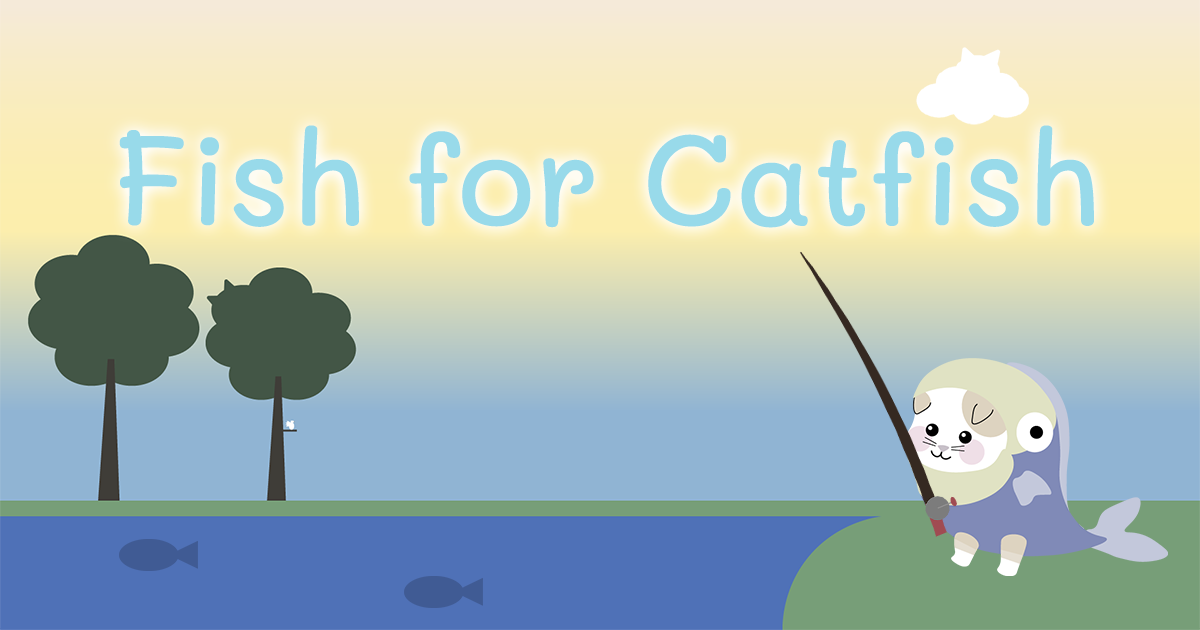
<style>
.page{position:relative;width:1200px;height:630px}
.page>*{position:absolute;margin:0}
.t1{font:128px "Mali-Medium";color:#98daea}
</style>
<div class="page">
<p class="t1" style="left:119px;top:125px;width:975px;height:103px">Fish for Catfish</p>
</div>
